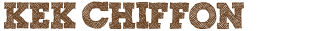
<style>
.page{position:relative;width:333px;height:31px;background:#ffffff}
.page>*{position:absolute;margin:0}
.t1{font:36px "ScribbleBoxDEMO";color:#684121}
</style>
<div class="page">
<p class="t1" style="left:3px;top:1px;width:241px;height:29px">Kek Chiffon</p>
</div>
